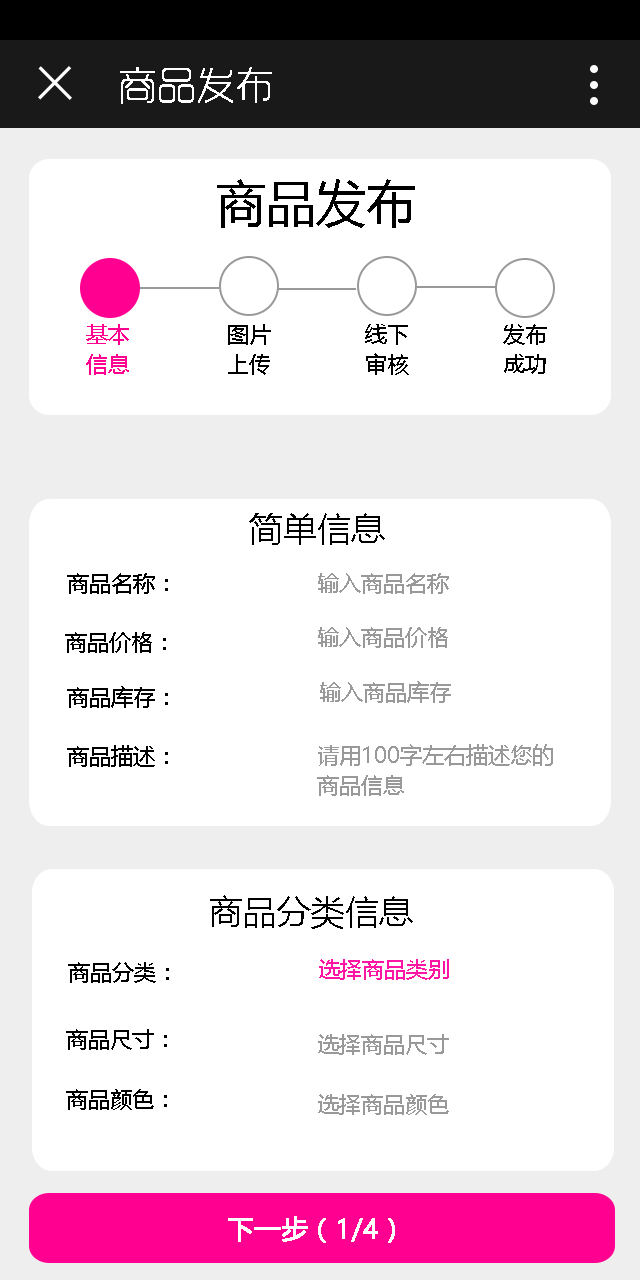
<style>
.page{position:relative;width:640px;height:1280px;background:#ffffff}
.page>*{position:absolute;margin:0}
.t1{font:38px "RTWSYueGoG0v1-ExLight";color:#ffffff;font-weight:bold}
.t2{font:50px "MicrosoftYaHei";color:#000000}
.t3{font:22px/30px "MicrosoftYaHei";color:#ff0090}
.t4{font:22px/30px "MicrosoftYaHei";color:#000000}
.t5{font:34px "MicrosoftYaHei";color:#000000}
.t6{font:22px "MicrosoftYaHei";color:#000000}
.t7{font:22px "MicrosoftYaHei";color:#999999}
.t8{font:22px/30px "MicrosoftYaHei";color:#999999}
.t9{font:22px "MicrosoftYaHei";color:#ff15a4}
.t10{font:26px "MicrosoftYaHei";color:#ffffff;font-weight:bold}
</style>
<div class="page">
<p class="t1" style="left:120px;top:67px;width:152px;height:37px">商品发布</p>
<p class="t2" style="left:217px;top:179px;width:198px;height:49px">商品发布</p>
<p class="t3" style="left:86px;top:324px;width:43px;height:51px">基本<br>信息</p>
<p class="t4" style="left:228px;top:324px;width:43px;height:51px">图片<br>上传</p>
<p class="t4" style="left:365px;top:324px;width:44px;height:51px">线下<br>审核</p>
<p class="t4" style="left:503px;top:324px;width:44px;height:50px">发布<br>成功</p>
<p class="t5" style="left:249px;top:513px;width:136px;height:32px">简单信息</p>
<p class="t6" style="left:67px;top:573px;width:101px;height:21px">商品名称：</p>
<p class="t7" style="left:318px;top:573px;width:131px;height:21px">输入商品名称</p>
<p class="t7" style="left:318px;top:627px;width:130px;height:21px">输入商品价格</p>
<p class="t6" style="left:65px;top:632px;width:101px;height:21px">商品价格：</p>
<p class="t6" style="left:67px;top:686px;width:101px;height:22px">商品库存：</p>
<p class="t7" style="left:320px;top:681px;width:131px;height:22px">输入商品库存</p>
<p class="t6" style="left:67px;top:745px;width:101px;height:22px">商品描述：</p>
<p class="t8" style="left:317px;top:744px;width:236px;height:52px">请用100字左右描述您的<br>商品信息</p>
<p class="t5" style="left:210px;top:895px;width:203px;height:34px">商品分类信息</p>
<p class="t6" style="left:68px;top:962px;width:101px;height:21px">商品分类：</p>
<p class="t9" style="left:319px;top:959px;width:130px;height:21px">选择商品类别</p>
<p class="t6" style="left:66px;top:1029px;width:101px;height:21px">商品尺寸：</p>
<p class="t7" style="left:318px;top:1034px;width:131px;height:21px">选择商品尺寸</p>
<p class="t6" style="left:66px;top:1089px;width:101px;height:21px">商品颜色：</p>
<p class="t7" style="left:318px;top:1094px;width:131px;height:21px">选择商品颜色</p>
<p class="t10" style="left:228px;top:1216px;width:167px;height:27px">下一步（1/4）</p>
</div>
